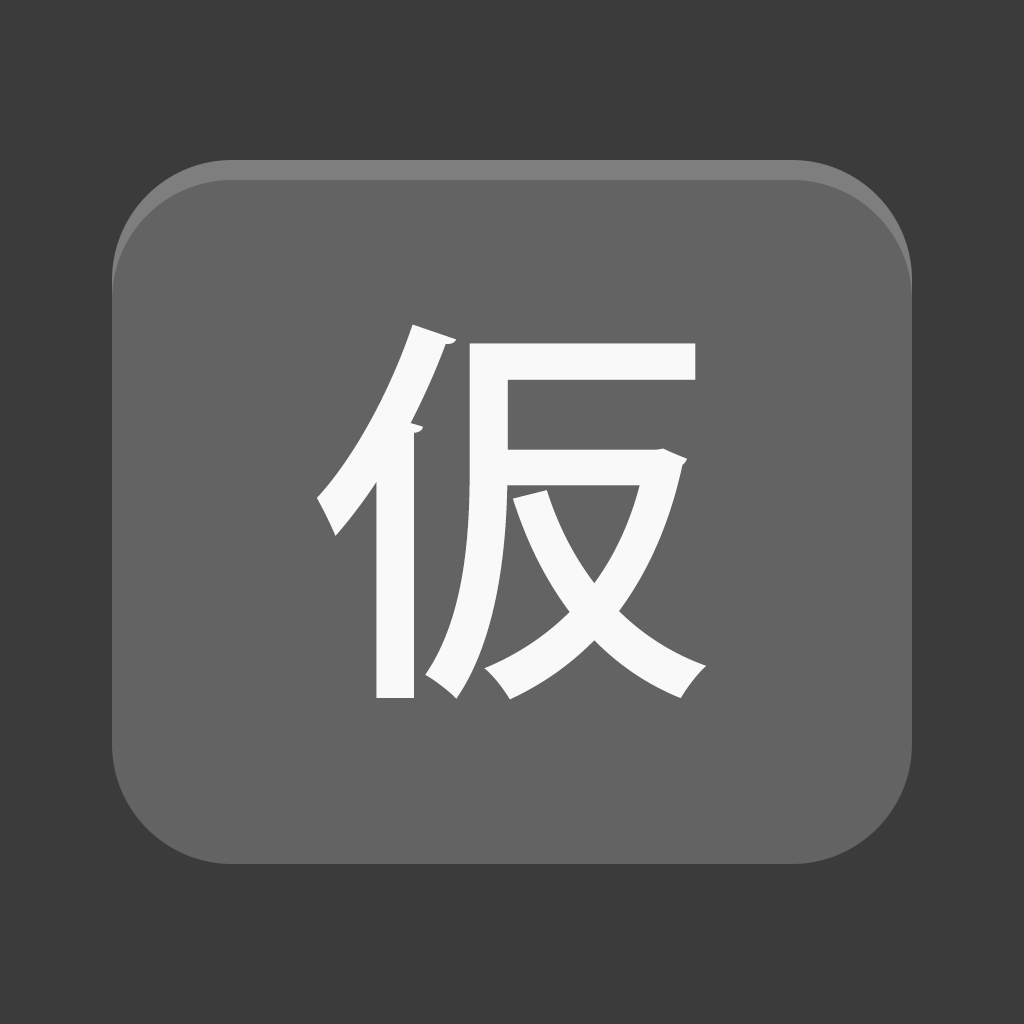
<style>
.page{position:relative;width:1024px;height:1024px;background:#3b3b3b}
.page>*{position:absolute;margin:0}
.t1{font:400px "KozGoPr6N-Medium";color:#f9f9f9}
</style>
<div class="page">
<p class="t1" style="left:317px;top:324px;width:389px;height:376px">仮</p>
</div>
